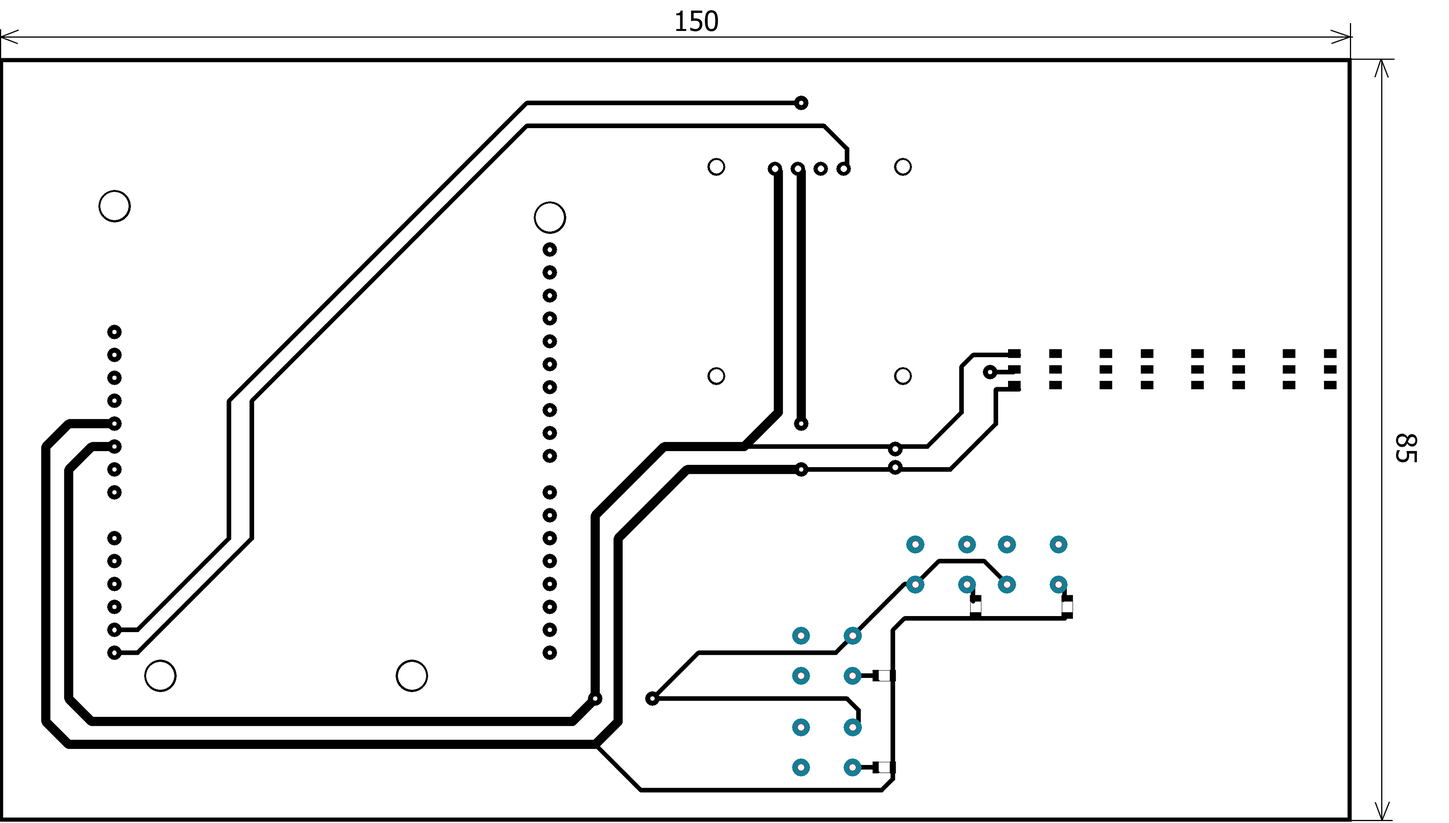
<style>
.page{position:relative;width:1449px;height:823px;background:#ffffff}
.page>*{position:absolute;margin:0}
.t1{font:28.2px "Tahoma";color:#000000}
.t2{font:28.1px "Tahoma";color:#000000}
</style>
<div class="page">
<p class="t1" style="left:677px;top:10px;width:41px;height:21px">150</p>
<p class="t2" style="left:1396px;top:433px;width:22px;height:29px;rotate:90deg">85</p>
</div>
